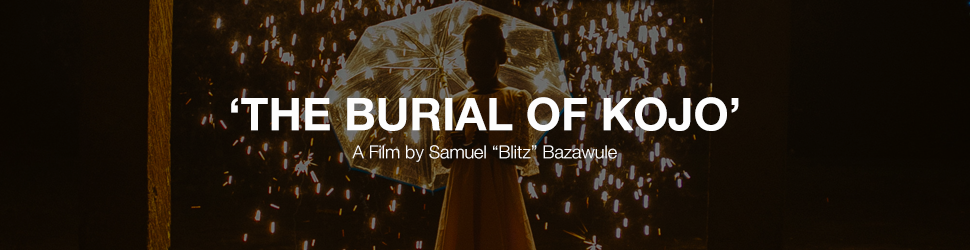
<style>
.page{position:relative;width:970px;height:250px}
.page>*{position:absolute;margin:0}
.t1{font:18px/28px "HelveticaNeue-Light";color:#fdfdfd}
.t2{font:45.3px/120px "HelveticaNeue-Bold";color:#fdfdfd}
</style>
<div class="page">
<p class="t1" style="left:231px;top:97px;width:508px;height:65px;text-align:center"><span class="t2">‘THE BURIAL OF KOJO’<br></span>A Film by Samuel “Blitz” Bazawule</p>
</div>
